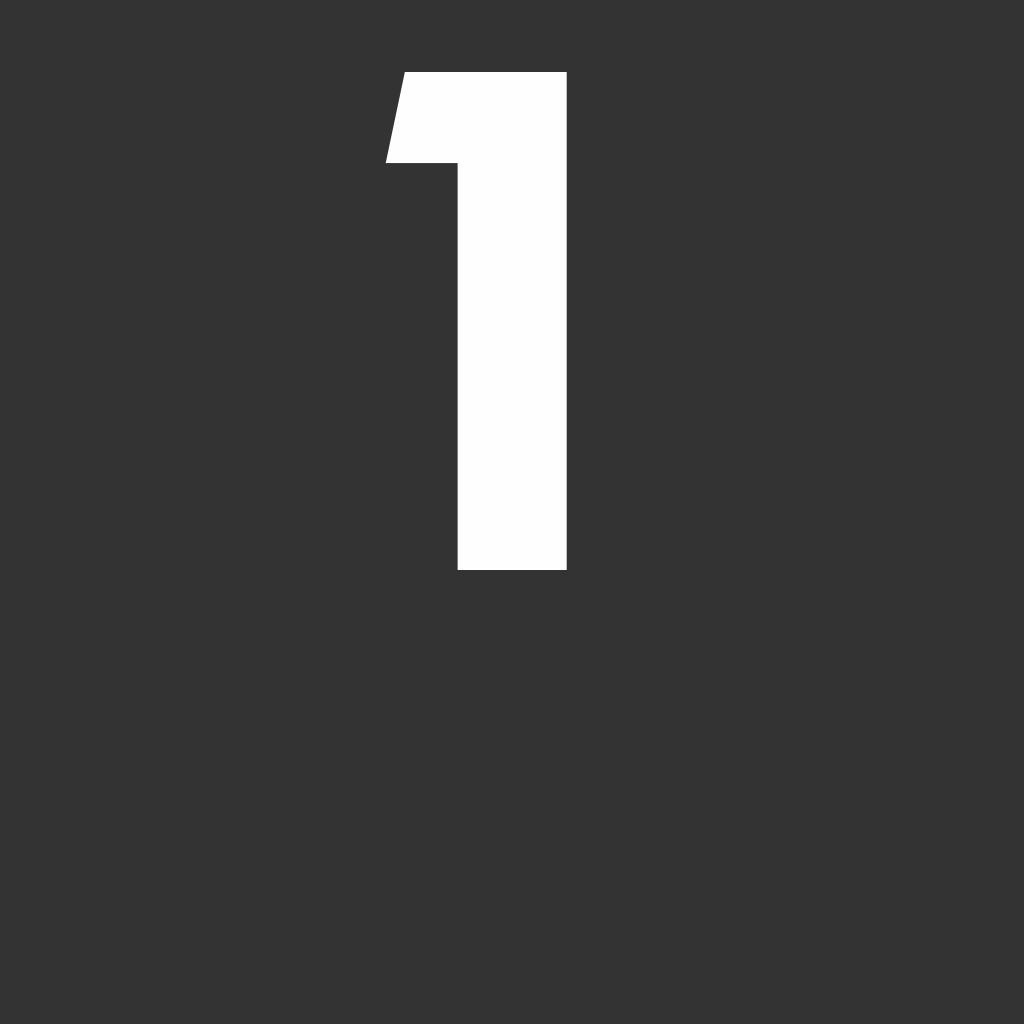
<style>
.page{position:relative;width:1024px;height:1024px;background:#333333}
.page>*{position:absolute;margin:0}
.t1{font:800px "TwCenMT-Bold";letter-spacing:0.05em;color:#fffefe}
</style>
<div class="page">
<p class="t1" style="left:385px;top:72px;width:182px;height:498px">1</p>
</div>
